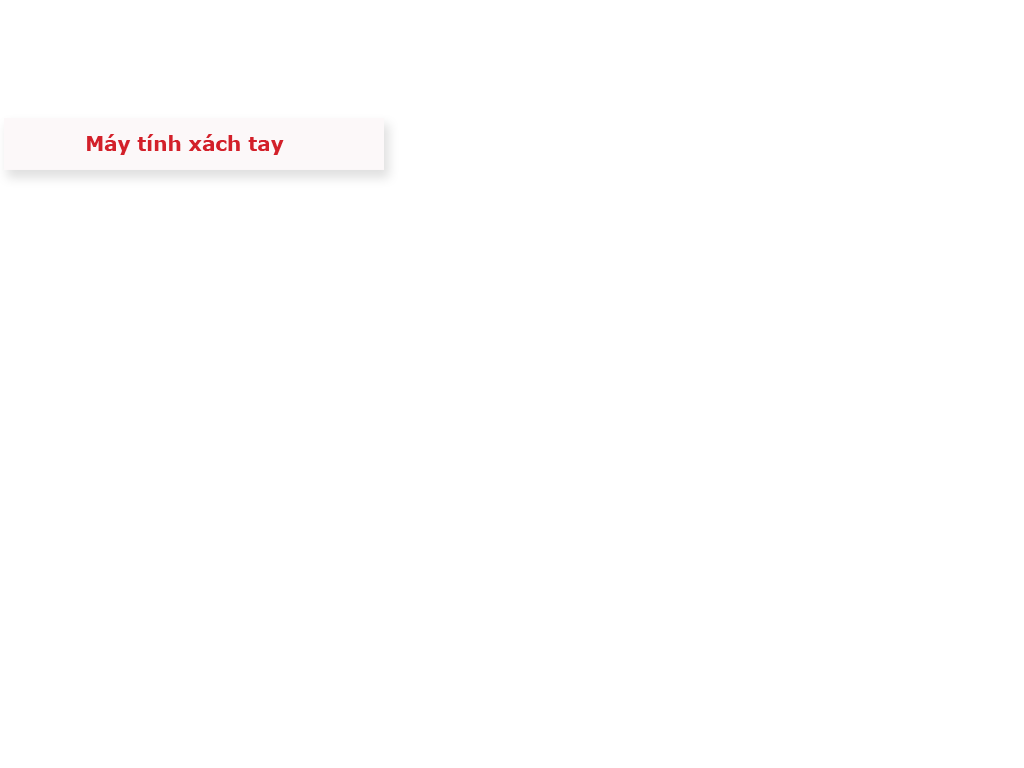
<style>
.page{position:relative;width:1024px;height:768px;background:#ffffff}
.page>*{position:absolute;margin:0}
.t1{font:20px "Verdana-Bold";color:#d3202a}
</style>
<div class="page">
<p class="t1" style="left:87px;top:134px;width:197px;height:21px">Máy tính xách tay</p>
</div>
